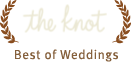
<style>
.page{position:relative;width:131px;height:62px;background:#ffffff}
.page>*{position:absolute;margin:0}
.t1{font:13px "MetaPlusNormal-Roman";letter-spacing:0.05em;color:#85603c}
</style>
<div class="page">
<p class="t1" style="left:15px;top:49px;width:103px;height:13px">Best of Weddings</p>
</div>
